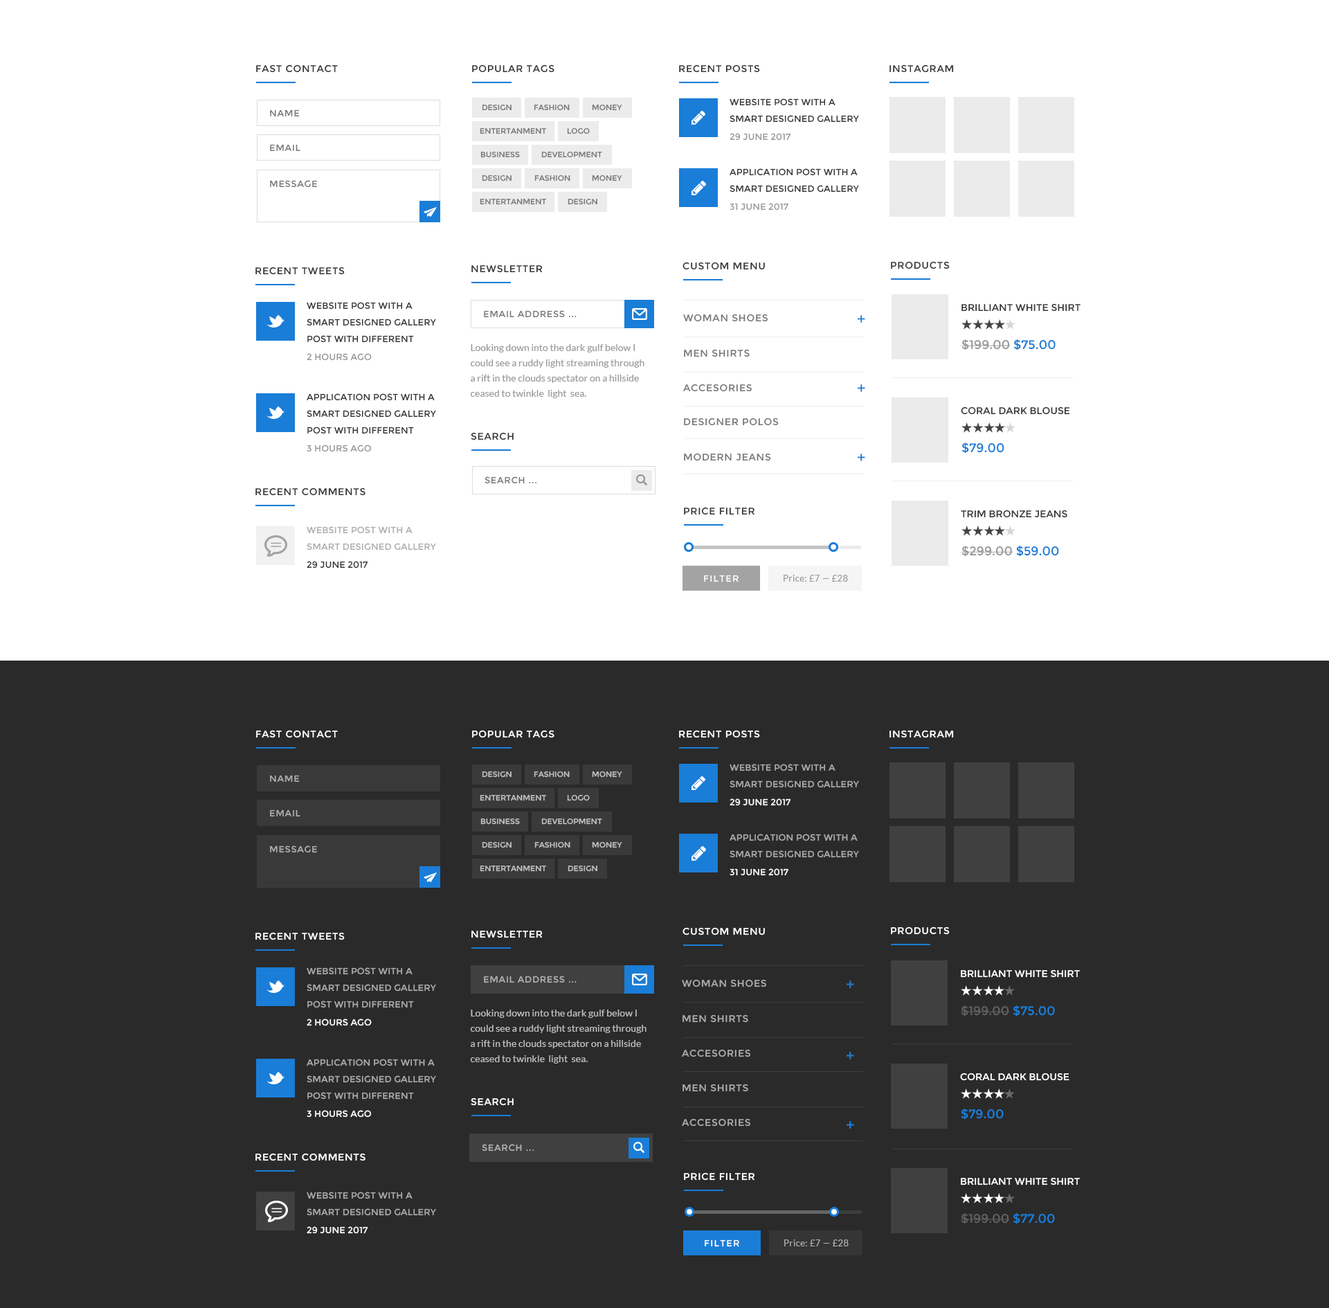
<style>
.page{position:relative;width:1329px;height:1308px;background:#ffffff}
.page>*{position:absolute;margin:0}
.t1{font:9.7px "Montserrat-Regular";letter-spacing:0.05em;color:#333333;text-transform:uppercase}
.t2{font:9px/16.6px "Montserrat-Regular";color:#333333;text-transform:uppercase}
.t3{font:9px "Montserrat-Regular";letter-spacing:0.05em;color:#777777;text-transform:uppercase}
.t4{font:7.6px "Montserrat-Regular";color:#777777;text-transform:uppercase}
.t5{font:9px "Montserrat-Regular";color:#999999;text-transform:uppercase}
.t6{font:9.7px "Montserrat-Regular";color:#333333;text-transform:uppercase}
.t7{font:9.7px "Montserrat-Regular";letter-spacing:0.05em;color:#777777;text-transform:uppercase}
.t8{font:15.2px "Montserrat-Regular";color:#1a7dd7}
.t9{font:12.5px "Montserrat-Regular";color:#999999;text-transform:uppercase}
.t10{font:12.5px "Montserrat-Regular";color:#1a7dd7;text-transform:uppercase}
.t11{font:9.7px/15.2px "Lato-Regular";color:#999999}
.t12{font:9px/16.6px "Montserrat-Regular";color:#adadad;text-transform:uppercase}
.t13{font:9px "Montserrat-Regular";color:#333333;text-transform:uppercase}
.t14{font:9px "Montserrat-Regular";letter-spacing:0.1em;color:#ffffff;text-transform:uppercase}
.t15{font:9px "Lato-Regular";letter-spacing:0.03em;color:#999999}
.t16{font:9.7px "Montserrat-Regular";letter-spacing:0.05em;color:#ffffff;text-transform:uppercase}
.t17{font:7.6px "Montserrat-Regular";color:#c0c0c0;text-transform:uppercase}
.t18{font:9px/16.6px "Montserrat-Regular";color:#ababab;text-transform:uppercase}
.t19{font:9px "Montserrat-Regular";letter-spacing:0.05em;color:#afafaf;text-transform:uppercase}
.t20{font:9px "Montserrat-Regular";color:#ffffff;text-transform:uppercase}
.t21{font:7.6px "Montserrat-Regular";color:#c1c1c1;text-transform:uppercase}
.t22{font:9px "Montserrat-Regular";letter-spacing:0.05em;color:#b1b1b1;text-transform:uppercase}
.t23{font:9.7px "Montserrat-Regular";color:#ffffff;text-transform:uppercase}
.t24{font:9.7px "Montserrat-Regular";letter-spacing:0.05em;color:#ababab;text-transform:uppercase}
.t25{font:9.7px/15.2px "Lato-Regular";color:#bdbdbd}
.t26{font:12.5px "Montserrat-Regular";color:#606060;text-transform:uppercase}
.t27{font:9px "Lato-Regular";letter-spacing:0.03em;color:#aeaeae}
</style>
<div class="page">
<p class="t1" style="left:256px;top:64px;width:82px;height:9px">Fast contact</p>
<p class="t1" style="left:472px;top:64px;width:83px;height:9px">Popular tags</p>
<p class="t1" style="left:679px;top:64px;width:81px;height:9px">Recent Posts</p>
<p class="t1" style="left:890px;top:64px;width:64px;height:9px">Instagram</p>
<p class="t2" style="left:730px;top:98px;width:129px;height:25px">Website Post with A Smart Designed Gallery Post</p>
<p class="t3" style="left:270px;top:109px;width:30px;height:8px">Name</p>
<p class="t4" style="left:482px;top:105px;width:30px;height:6px">Design</p>
<p class="t4" style="left:534px;top:105px;width:36px;height:6px">Fashion</p>
<p class="t4" style="left:592px;top:105px;width:30px;height:6px">Money</p>
<p class="t4" style="left:480px;top:128px;width:66px;height:6px">Entertanment</p>
<p class="t4" style="left:567px;top:128px;width:23px;height:6px">Logo</p>
<p class="t5" style="left:730px;top:133px;width:61px;height:8px">29 June 2017</p>
<p class="t3" style="left:270px;top:144px;width:30px;height:8px">Email</p>
<p class="t4" style="left:480px;top:152px;width:40px;height:6px">Business</p>
<p class="t4" style="left:541px;top:152px;width:61px;height:6px">Development</p>
<p class="t2" style="left:730px;top:168px;width:129px;height:24px">Application Post with A Smart Designed Gallery Post</p>
<p class="t3" style="left:270px;top:180px;width:47px;height:8px">Message</p>
<p class="t4" style="left:482px;top:175px;width:30px;height:6px">Design</p>
<p class="t4" style="left:534px;top:175px;width:36px;height:6px">Fashion</p>
<p class="t4" style="left:592px;top:175px;width:30px;height:6px">Money</p>
<p class="t4" style="left:480px;top:199px;width:66px;height:6px">Entertanment</p>
<p class="t4" style="left:568px;top:199px;width:29px;height:6px">Design</p>
<p class="t5" style="left:730px;top:203px;width:59px;height:7px">31 June 2017</p>
<p class="t1" style="left:255px;top:267px;width:90px;height:8px">Recent Tweets</p>
<p class="t1" style="left:471px;top:264px;width:72px;height:9px">Newsletter</p>
<p class="t1" style="left:683px;top:262px;width:82px;height:8px">Custom Menu</p>
<p class="t1" style="left:891px;top:261px;width:59px;height:8px">Products</p>
<p class="t2" style="left:307px;top:302px;width:129px;height:41px">Website Post with A Smart Designed Gallery Post with different</p>
<p class="t6" style="left:962px;top:303px;width:119px;height:9px">Brilliant White Shirt</p>
<p class="t3" style="left:484px;top:310px;width:93px;height:8px">Email Address ...</p>
<p class="t7" style="left:683px;top:314px;width:85px;height:8px">Woman Shoes</p>
<p class="t8" style="left:858px;top:315px;width:7px;height:8px">+</p>
<p class="t9" style="left:962px;top:339px;width:94px;height:11px">$199.00 <span class="t10">$75.00</span></p>
<p class="t5" style="left:307px;top:353px;width:65px;height:8px">2 Hours Ago</p>
<p class="t11" style="left:470px;top:344px;width:175px;height:54px">Looking down into the dark gulf below I could see a ruddy light streaming through a rift in the clouds spectator on a hillside ceased to twinkle  light  sea.</p>
<p class="t7" style="left:684px;top:349px;width:66px;height:8px">Men Shirts</p>
<p class="t7" style="left:683px;top:384px;width:69px;height:8px">Accesories</p>
<p class="t8" style="left:858px;top:384px;width:7px;height:8px">+</p>
<p class="t2" style="left:307px;top:393px;width:129px;height:41px">Application Post with A Smart Designed Gallery Post with different</p>
<p class="t6" style="left:961px;top:406px;width:109px;height:9px">Coral Dark Blouse</p>
<p class="t7" style="left:684px;top:417px;width:95px;height:9px">Designer Polos</p>
<p class="t1" style="left:471px;top:432px;width:43px;height:8px">Search</p>
<p class="t5" style="left:307px;top:444px;width:65px;height:8px">3 Hours Ago</p>
<p class="t10" style="left:962px;top:442px;width:43px;height:11px">$79.00</p>
<p class="t7" style="left:684px;top:453px;width:87px;height:8px">Modern Jeans</p>
<p class="t8" style="left:858px;top:453px;width:7px;height:8px">+</p>
<p class="t3" style="left:485px;top:476px;width:52px;height:8px">Search ...</p>
<p class="t1" style="left:255px;top:487px;width:111px;height:9px">Recent Comments</p>
<p class="t1" style="left:684px;top:507px;width:71px;height:8px">Price Filter</p>
<p class="t6" style="left:961px;top:510px;width:107px;height:8px">Trim Bronze Jeans</p>
<p class="t12" style="left:307px;top:526px;width:129px;height:24px">Website Post with A Smart Designed Gallery Post</p>
<p class="t9" style="left:962px;top:546px;width:97px;height:11px">$299.00 <span class="t10">$59.00</span></p>
<p class="t13" style="left:307px;top:561px;width:61px;height:7px">29 June 2017</p>
<p class="t14" style="left:704px;top:575px;width:35px;height:7px">Filter</p>
<p class="t15" style="left:784px;top:575px;width:64px;height:7px">Price: £7 — £28</p>
<p class="t16" style="left:256px;top:730px;width:82px;height:8px">Fast contact</p>
<p class="t16" style="left:472px;top:730px;width:83px;height:8px">Popular tags</p>
<p class="t16" style="left:679px;top:730px;width:81px;height:8px">Recent Posts</p>
<p class="t16" style="left:890px;top:730px;width:64px;height:8px">Instagram</p>
<p class="t17" style="left:482px;top:771px;width:30px;height:6px">Design</p>
<p class="t17" style="left:534px;top:771px;width:36px;height:6px">Fashion</p>
<p class="t17" style="left:592px;top:771px;width:30px;height:6px">Money</p>
<p class="t18" style="left:730px;top:764px;width:129px;height:24px">Website Post with A Smart Designed Gallery Post</p>
<p class="t19" style="left:270px;top:775px;width:30px;height:7px">Name</p>
<p class="t17" style="left:480px;top:795px;width:66px;height:6px">Entertanment</p>
<p class="t17" style="left:567px;top:795px;width:23px;height:6px">Logo</p>
<p class="t19" style="left:270px;top:809px;width:30px;height:8px">Email</p>
<p class="t20" style="left:730px;top:798px;width:61px;height:8px">29 June 2017</p>
<p class="t21" style="left:480px;top:818px;width:40px;height:7px">Business</p>
<p class="t17" style="left:541px;top:818px;width:61px;height:7px">Development</p>
<p class="t18" style="left:730px;top:834px;width:129px;height:24px">Application Post with A Smart Designed Gallery Post</p>
<p class="t19" style="left:270px;top:845px;width:47px;height:8px">Message</p>
<p class="t17" style="left:482px;top:842px;width:30px;height:6px">Design</p>
<p class="t17" style="left:534px;top:842px;width:36px;height:6px">Fashion</p>
<p class="t17" style="left:592px;top:842px;width:30px;height:6px">Money</p>
<p class="t17" style="left:480px;top:865px;width:66px;height:7px">Entertanment</p>
<p class="t17" style="left:568px;top:865px;width:29px;height:7px">Design</p>
<p class="t20" style="left:730px;top:868px;width:59px;height:8px">31 June 2017</p>
<p class="t16" style="left:471px;top:930px;width:72px;height:8px">Newsletter</p>
<p class="t16" style="left:683px;top:927px;width:82px;height:8px">Custom Menu</p>
<p class="t16" style="left:891px;top:926px;width:59px;height:9px">Products</p>
<p class="t16" style="left:255px;top:932px;width:90px;height:8px">Recent Tweets</p>
<p class="t18" style="left:307px;top:967px;width:129px;height:41px">Website Post with A Smart Designed Gallery Post with different</p>
<p class="t22" style="left:484px;top:975px;width:93px;height:8px">Email Address ...</p>
<p class="t23" style="left:961px;top:969px;width:119px;height:9px">Brilliant White Shirt</p>
<p class="t24" style="left:682px;top:979px;width:84px;height:8px">Woman Shoes</p>
<p class="t8" style="left:847px;top:980px;width:7px;height:8px">+</p>
<p class="t25" style="left:470px;top:1009px;width:177px;height:54px">Looking down into the dark gulf below I could see a ruddy light streaming through a rift in the clouds spectator on a hillside ceased to twinkle  light  sea.</p>
<p class="t26" style="left:961px;top:1005px;width:94px;height:11px">$199.00 <span class="t10">$75.00</span></p>
<p class="t20" style="left:307px;top:1018px;width:65px;height:8px">2 Hours Ago</p>
<p class="t24" style="left:683px;top:1014px;width:65px;height:9px">Men Shirts</p>
<p class="t24" style="left:682px;top:1049px;width:68px;height:8px">Accesories</p>
<p class="t18" style="left:307px;top:1059px;width:129px;height:40px">Application Post with A Smart Designed Gallery Post with different</p>
<p class="t8" style="left:847px;top:1052px;width:7px;height:7px">+</p>
<p class="t23" style="left:960px;top:1072px;width:110px;height:9px">Coral Dark Blouse</p>
<p class="t24" style="left:683px;top:1083px;width:65px;height:9px">Men Shirts</p>
<p class="t16" style="left:471px;top:1097px;width:43px;height:9px">Search</p>
<p class="t20" style="left:307px;top:1110px;width:65px;height:7px">3 Hours Ago</p>
<p class="t10" style="left:961px;top:1108px;width:43px;height:11px">$79.00</p>
<p class="t24" style="left:682px;top:1118px;width:68px;height:8px">Accesories</p>
<p class="t8" style="left:847px;top:1121px;width:7px;height:7px">+</p>
<p class="t22" style="left:482px;top:1144px;width:52px;height:7px">Search ...</p>
<p class="t16" style="left:255px;top:1153px;width:111px;height:8px">Recent Comments</p>
<p class="t16" style="left:684px;top:1172px;width:71px;height:8px">Price Filter</p>
<p class="t23" style="left:961px;top:1177px;width:119px;height:8px">Brilliant White Shirt</p>
<p class="t18" style="left:307px;top:1191px;width:129px;height:25px">Website Post with A Smart Designed Gallery Post</p>
<p class="t26" style="left:961px;top:1213px;width:94px;height:11px">$199.00 <span class="t10">$77.00</span></p>
<p class="t20" style="left:307px;top:1226px;width:61px;height:8px">29 June 2017</p>
<p class="t14" style="left:705px;top:1239px;width:34px;height:8px">Filter</p>
<p class="t27" style="left:784px;top:1239px;width:65px;height:7px">Price: £7 — £28</p>
</div>
